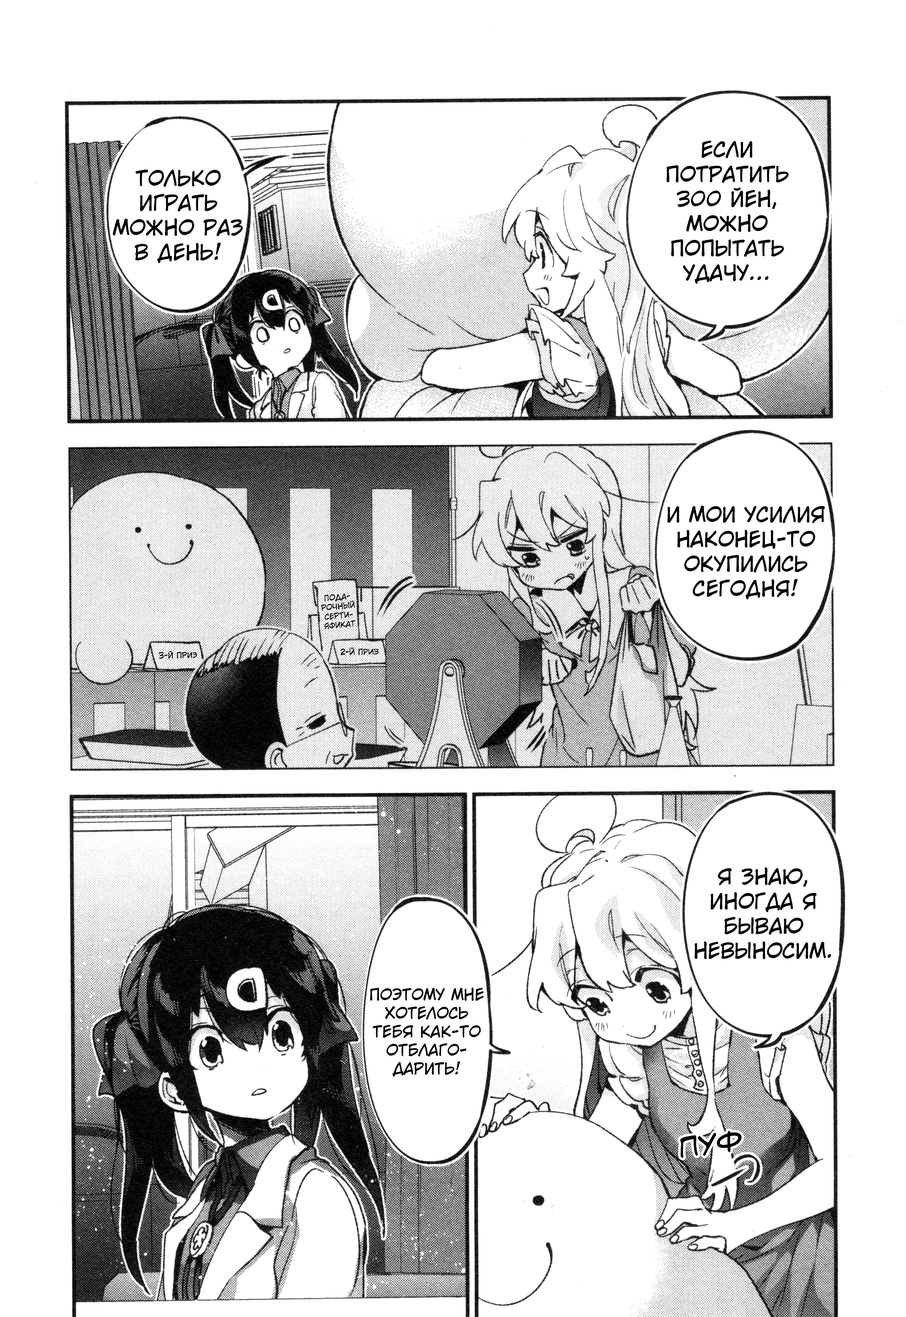
<style>
.page{position:relative;width:906px;height:1317px;background:#ffffff}
.page>*{position:absolute;margin:0}
.t1{font:20.6px "v_CCWildWordsLower";letter-spacing:0.006em;color:#000000;text-transform:uppercase}
.t2{font:7.7px "CCWildWordsLower-Regular";letter-spacing:0.006em;color:#000000;text-transform:uppercase}
.t3{font:7.7px "v_CCWildWordsLower";letter-spacing:0.006em;color:#000000;text-transform:uppercase}
.t4{font:15.4px "v_CCWildWordsLower";letter-spacing:0.006em;color:#000000;text-transform:uppercase}
.t5{font:36px "v_HometownHeroBB";letter-spacing:0.006em;color:#000000;text-transform:uppercase}
</style>
<div class="page">
<p class="t1" style="left:666px;top:141px;width:123px;height:143px;text-align:center">Если<br>потратить<br>300 йен,<br>можно попытать удачу...</p>
<p class="t1" style="left:113px;top:169px;width:130px;height:94px;text-align:center">Только играть можно раз в день!</p>
<p class="t1" style="left:667px;top:505px;width:158px;height:94px;text-align:center">И мои усилия наконец-то окупились сегодня!</p>
<p class="t2" style="left:321px;top:593px;width:34px;height:36px;text-align:center;rotate:-5deg">Пода-<br>рочный серти-<br>яфикат</p>
<p class="t3" style="left:159px;top:650px;width:38px;height:9px;rotate:-2deg">3-й Приз</p>
<p class="t2" style="left:340px;top:647px;width:38px;height:8px;rotate:-2deg">2-й Приз</p>
<p class="t1" style="left:694px;top:867px;width:137px;height:92px;text-align:center">Я знаю, иногда я бываю невыносим.</p>
<p class="t4" style="left:370px;top:987px;width:114px;height:89px;text-align:center">Поэтому мне<br>хотелось тебя как-то отблаго-<br>дарить!</p>
<p class="t5" style="left:680px;top:1130px;width:61px;height:28px;rotate:-6deg">Пуф</p>
</div>
